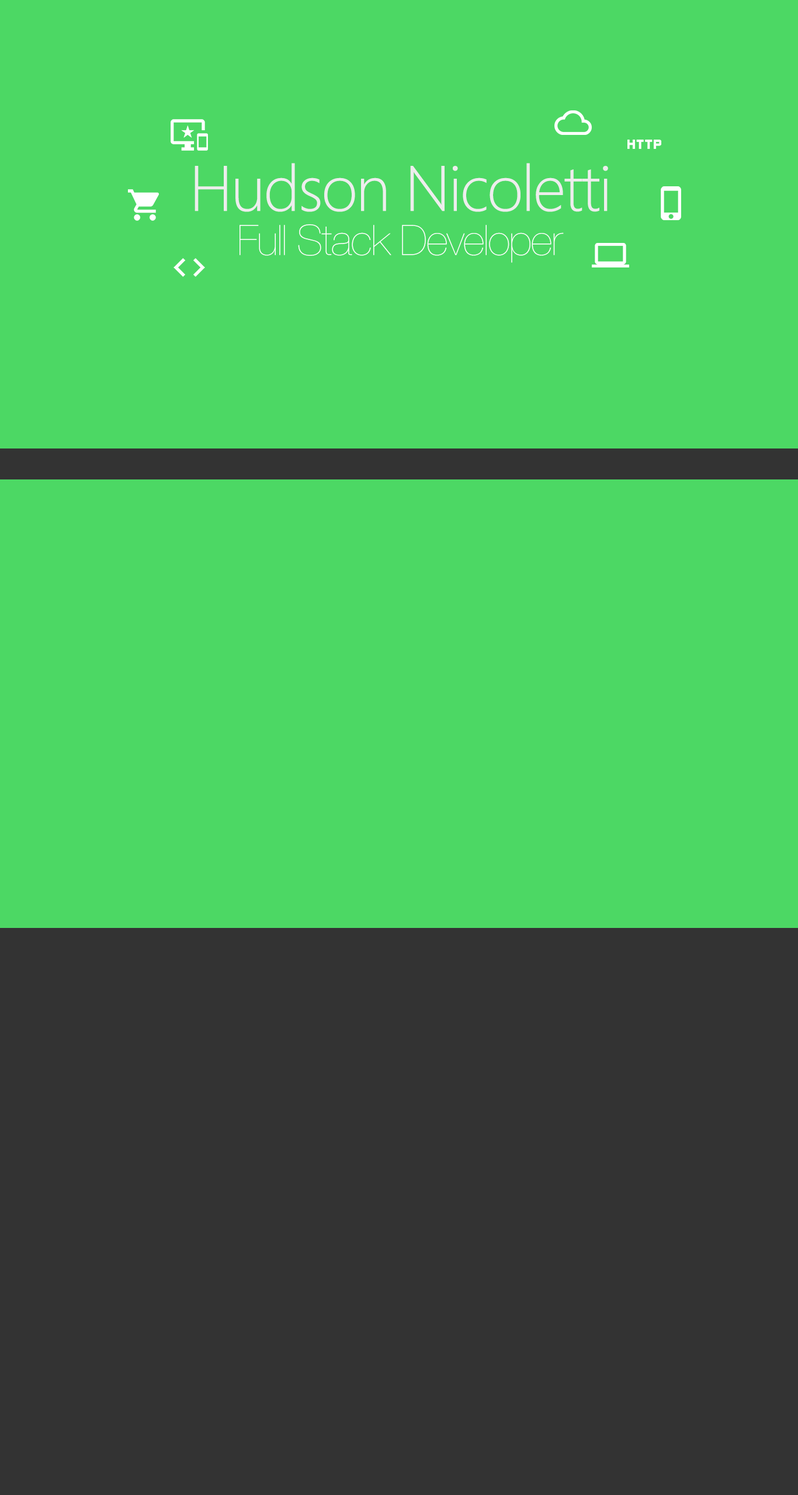
<style>
.page{position:relative;width:798px;height:1495px;background:#4cd864}
.page>*{position:absolute;margin:0}
.t1{font:64.2px "SegoeUI-Light";letter-spacing:-0.025em;color:#ededed}
.t2{font:42px "HelveticaNeue-UltraLight";letter-spacing:-0.025em;color:#ffffff}
</style>
<div class="page">
<p class="t1" style="left:194px;top:163px;width:414px;height:49px">Hudson Nicoletti</p>
<p class="t2" style="left:239px;top:224px;width:325px;height:39px">Full Stack Developer</p>
</div>
